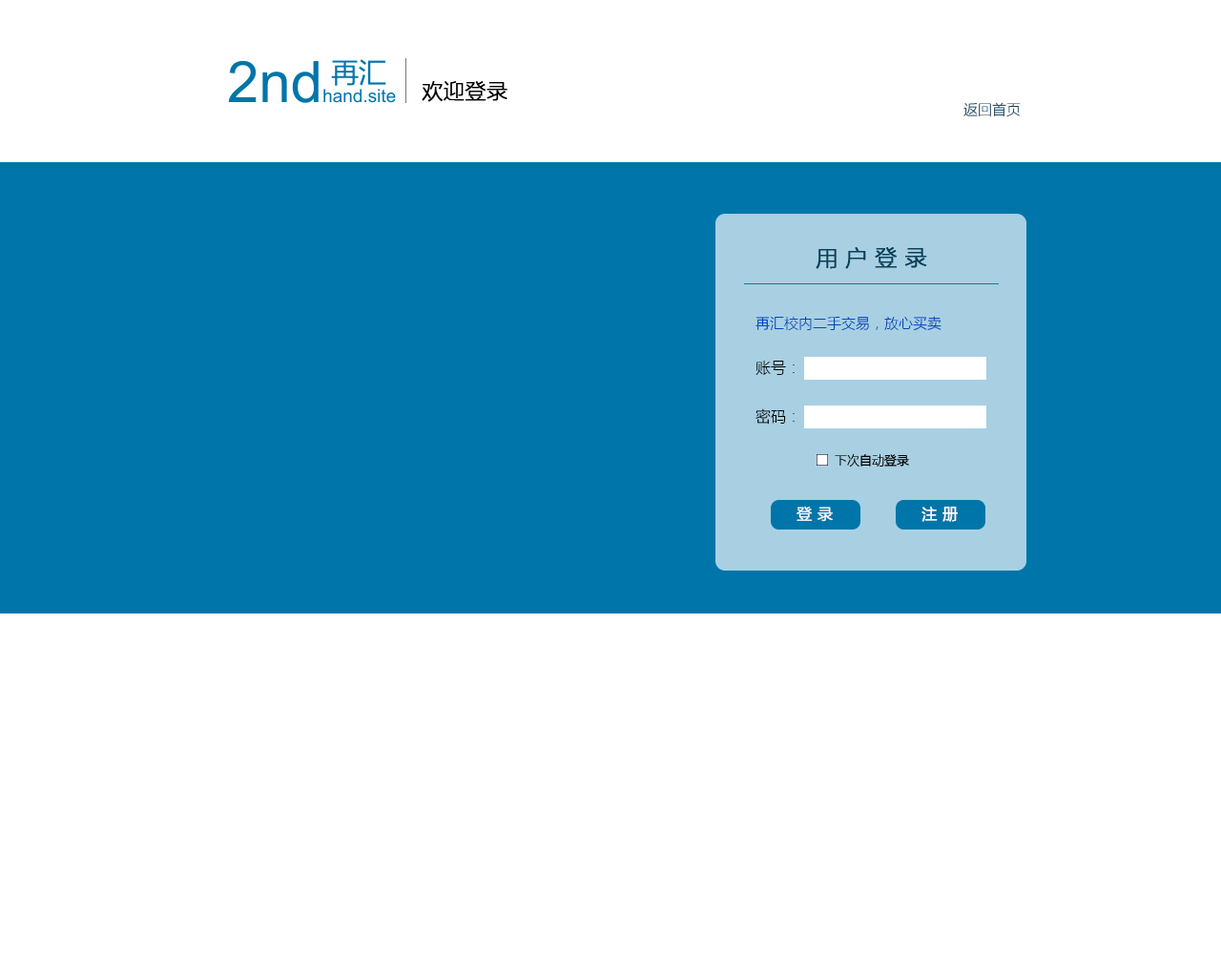
<style>
.page{position:relative;width:1221px;height:977px;background:#ffffff}
.page>*{position:absolute;margin:0}
.t1{font:21px "MicrosoftYaHeiLight";color:#000000;font-weight:bold}
.t2{font:14.3px "MicrosoftYaHeiLight";color:#07425e}
.t3{font:21.9px "MicrosoftYaHeiLight";color:#07425e;font-weight:bold}
.t4{font:14.3px "MicrosoftYaHeiLight";color:#0047bb}
.t5{font:15.3px "MicrosoftYaHeiLight";color:#000000}
.t6{font:15.3px "MicrosoftYaHeiLight";color:#fdfefe;font-weight:bold}
</style>
<div class="page">
<p class="t1" style="left:422px;top:81px;width:85px;height:21px">欢迎登录</p>
<p class="t2" style="left:963px;top:102px;width:58px;height:14px">返回首页</p>
<p class="t3" style="left:816px;top:247px;width:111px;height:22px">用 户 登 录</p>
<p class="t4" style="left:755px;top:316px;width:186px;height:15px">再汇校内二手交易，放心买卖</p>
<p class="t5" style="left:755px;top:361px;width:40px;height:14px">账号：</p>
<p class="t5" style="left:755px;top:408px;width:40px;height:16px">密码：</p>
<p class="t6" style="left:796px;top:506px;width:37px;height:16px">登 录</p>
<p class="t6" style="left:921px;top:506px;width:37px;height:16px">注 册</p>
</div>
